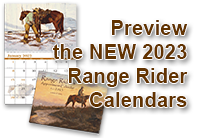
<style>
.page{position:relative;width:200px;height:138px;background:#ffffff}
.page>*{position:absolute;margin:0}
.t1{font:20.1px "Arial-BoldMT";color:#623300}
</style>
<div class="page">
<p class="t1" style="left:53px;top:20px;width:135px;height:87px;text-align:right">Preview<br>the NEW 2023<br>Range Rider<br>Calendars</p>
</div>
